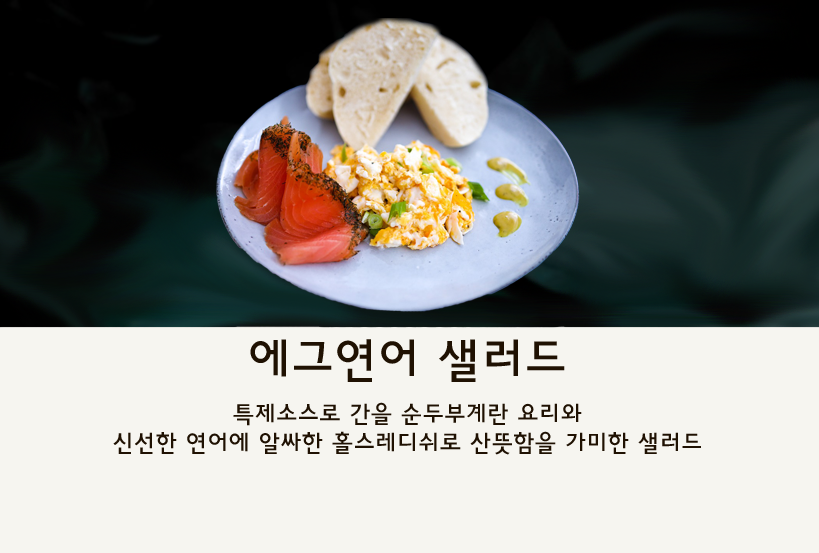
<style>
.page{position:relative;width:819px;height:553px;background:#f6f5f0}
.page>*{position:absolute;margin:0}
.t1{font:24px "HaanYGodic23";color:#1f1102}
.t2{font:48px "HaanYGodic23";color:#1f1102}
</style>
<div class="page">
<p class="t1" style="left:113px;top:339px;width:588px;height:116px;text-align:center"><span class="t2">에그연어 샐러드<br></span><br><br>특제소스로 간을 순두부계란 요리와 <br>신선한 연어에 알싸한 홀스레디쉬로 산뜻함을 가미한 샐러드</p>
</div>
